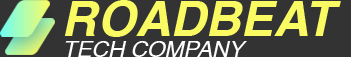
<style>
.page{position:relative;width:351px;height:57px;background:#333333}
.page>*{position:absolute;margin:0}
.t1{font:48.8px "Helvetica-BoldOblique";color:#fafb63;text-transform:uppercase}
.t2{font:22.7px "Helvetica-Oblique";color:#ffffff;text-transform:uppercase}
</style>
<div class="page">
<p class="t1" style="left:64px;top:0px;width:277px;height:37px">ROADBEAT</p>
<p class="t2" style="left:65px;top:41px;width:182px;height:16px">TECH COMPANY</p>
</div>
